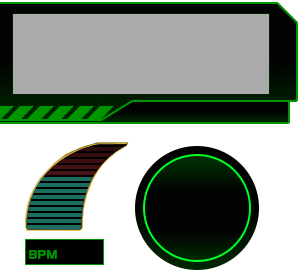
<style>
.page{position:relative;width:304px;height:270px;background:#ffffff}
.page>*{position:absolute;margin:0}
.t1{font:11.9px "HandelGothicBT-Regular";color:#009500}
</style>
<div class="page">
<p class="t1" style="left:29px;top:250px;width:28px;height:9px">BPM</p>
</div>
